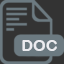
<style>
.page{position:relative;width:64px;height:64px;background:#333333}
.page>*{position:absolute;margin:0}
.t1{font:16px "ArialRoundedMTBold";color:#ececf0}
</style>
<div class="page">
<p class="t1" style="left:22px;top:40px;width:35px;height:11px">DOC</p>
</div>
